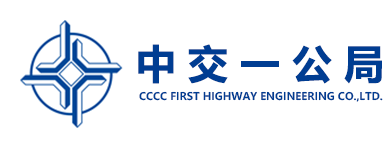
<style>
.page{position:relative;width:387px;height:149px;background:#ffffff}
.page>*{position:absolute;margin:0}
.t1{font:40px "MicrosoftYaHei-Bold";color:#003d92}
.t2{font:10.4px "MicrosoftYaHei-Bold";color:#003d92}
</style>
<div class="page">
<p class="t1" style="left:138px;top:44px;width:244px;height:40px">中 交 一 公 局</p>
<p class="t2" style="left:139px;top:91px;width:244px;height:11px">CCCC FIRST HIGHWAY ENGINEERING CO.,LTD.</p>
</div>
